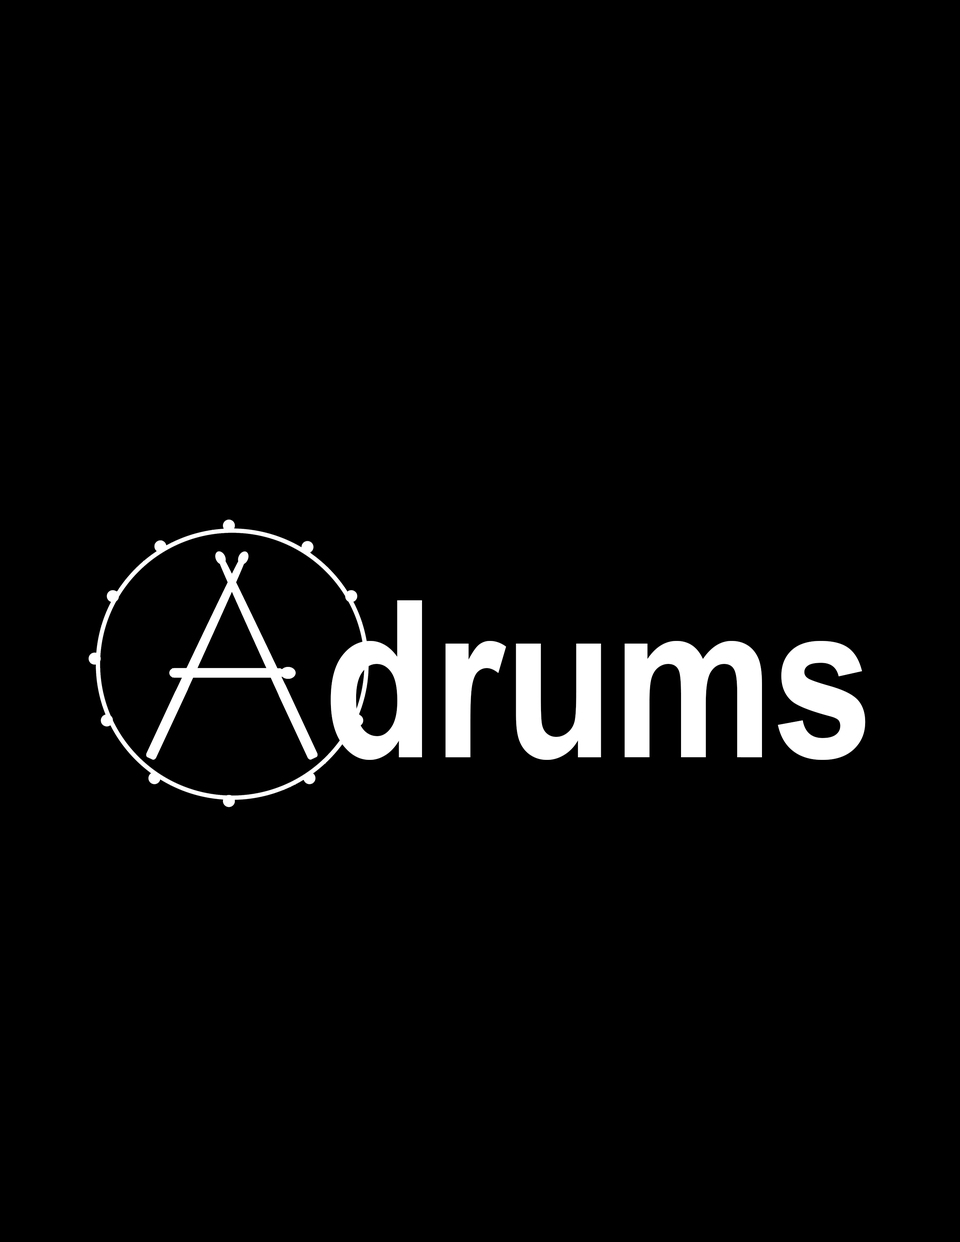
<style>
.page{position:relative;width:960px;height:1242px;background:#000000}
.page>*{position:absolute;margin:0}
.t1{font:219.6px "ArialNarrow-Bold";color:#ffffff}
</style>
<div class="page">
<p class="t1" style="left:331px;top:600px;width:534px;height:160px">drums</p>
</div>
